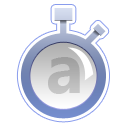
<style>
.page{position:relative;width:128px;height:128px;background:#ffffff}
.page>*{position:absolute;margin:0}
.t1{font:70.1px "SegoeUI-Bold";color:#b4b4b4}
</style>
<div class="page">
<p class="t1" style="left:48px;top:57px;width:32px;height:37px">a</p>
</div>
